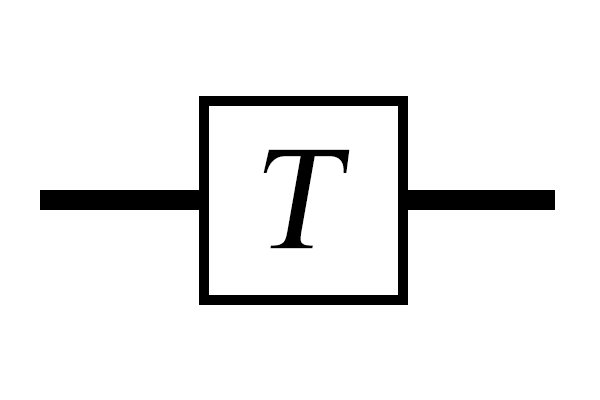
<style>
.page{position:relative;width:600px;height:400px;background:#ffffff}
.page>*{position:absolute;margin:0}
.t1{font:148.5px "TimesNewRomanPSMT";color:#000000;font-style:italic}
</style>
<div class="page">
<p class="t1" style="left:263px;top:149px;width:87px;height:100px">T</p>
</div>
